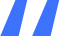
<style>
.page{position:relative;width:59px;height:36px;background:#3c72fc}
.page>*{position:absolute;margin:0}
.t1{font:150px "Jost-Medium";color:#3c72fc}
</style>
<div class="page">
<p class="t1" style="left:0px;top:0px;width:59px;height:36px">“</p>
</div>
